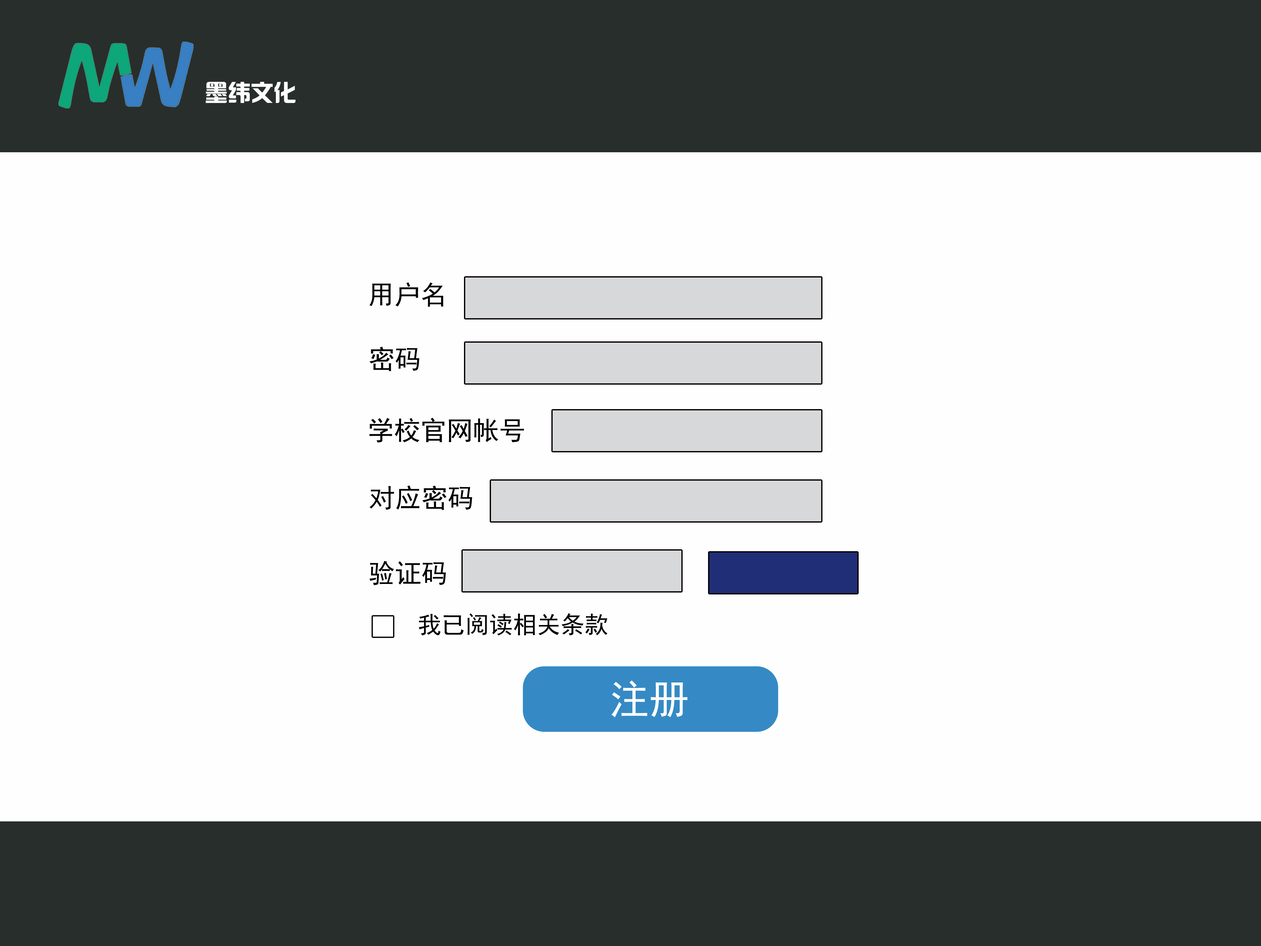
<style>
.page{position:relative;width:1261px;height:946px;background:#fefefe}
.page>*{position:absolute;margin:0}
.t1{font:22.9px "¹ã½Ý¾ÓÃÔÄã×Ö¿â";color:#fdfdfd}
.t2{font:26.3px "SimHei";color:#000000}
.t3{font:23.8px "SimHei";color:#000000}
.t4{font:39.7px "SimHei";color:#fefefe}
</style>
<div class="page">
<p class="t1" style="left:206px;top:82px;width:90px;height:21px">墨纬文化</p>
<p class="t2" style="left:369px;top:282px;width:74px;height:25px">用户名</p>
<p class="t2" style="left:369px;top:346px;width:50px;height:25px">密码</p>
<p class="t2" style="left:369px;top:418px;width:155px;height:24px">学校官网帐号</p>
<p class="t2" style="left:370px;top:485px;width:102px;height:25px">对应密码</p>
<p class="t2" style="left:369px;top:561px;width:77px;height:24px">验证码</p>
<p class="t3" style="left:419px;top:613px;width:189px;height:22px">我已阅读相关条款</p>
<p class="t4" style="left:611px;top:680px;width:76px;height:37px">注册</p>
</div>
